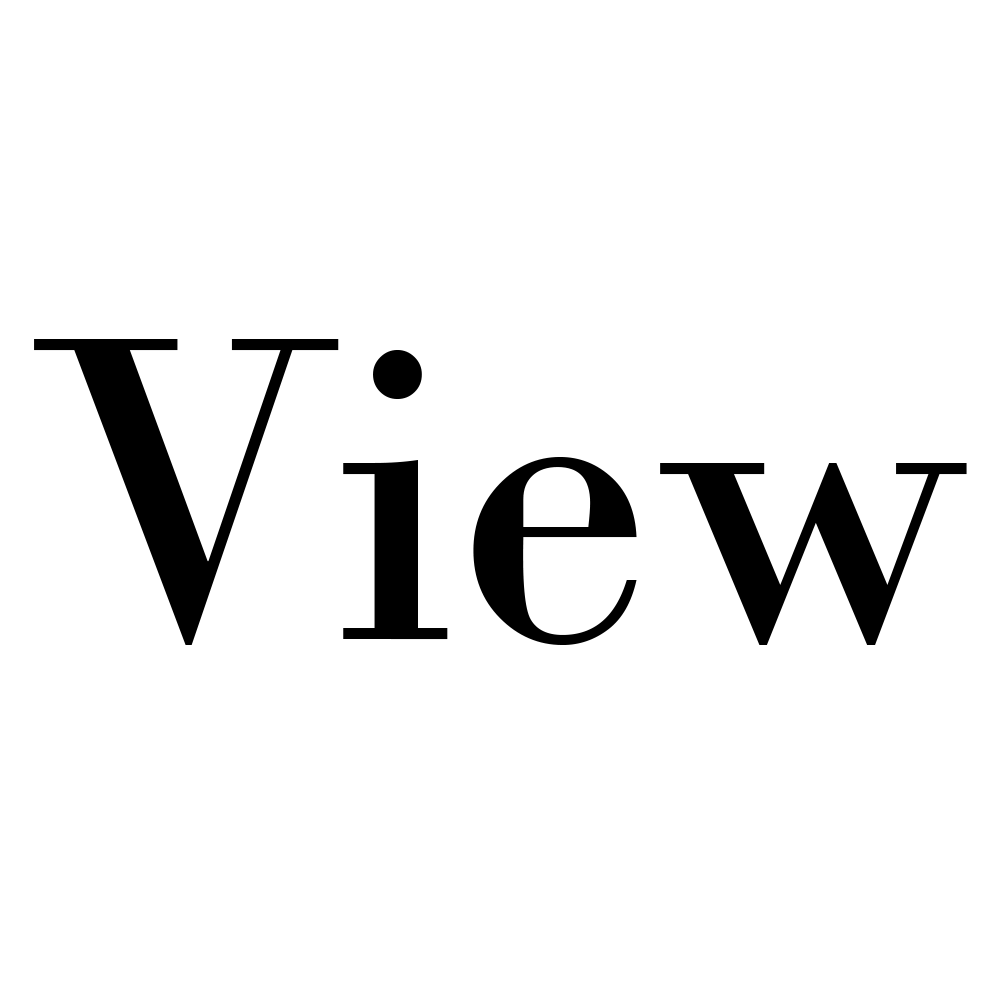
<style>
.page{position:relative;width:1000px;height:1000px;background:#ffffff}
.page>*{position:absolute;margin:0}
.t1{font:458.3px "BodoniMT";color:#000000}
</style>
<div class="page">
<p class="t1" style="left:34px;top:339px;width:933px;height:306px">View</p>
</div>
